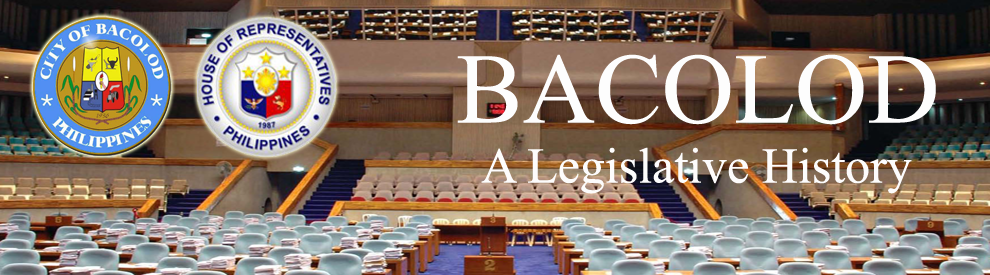
<style>
.page{position:relative;width:990px;height:275px}
.page>*{position:absolute;margin:0}
.t1{font:50px "TimesNewRomanPSMT";color:#fdfcfc}
.t2{font:100px "TimesNewRomanPSMT";color:#fdfdfd}
</style>
<div class="page">
<p class="t1" style="left:457px;top:54px;width:479px;height:140px;text-align:center"><span class="t2">BACOLOD<br></span>A Legislative History</p>
</div>
